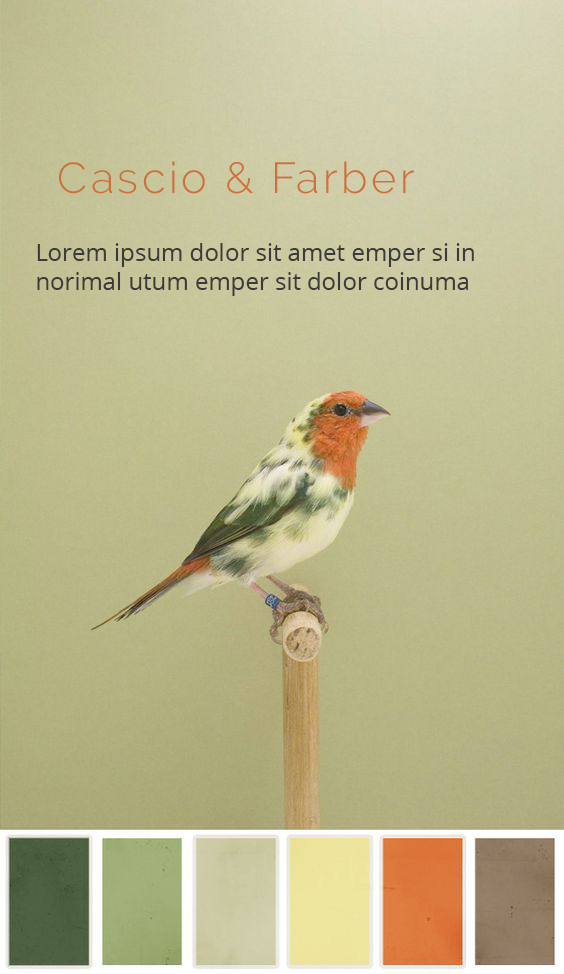
<style>
.page{position:relative;width:564px;height:974px}
.page>*{position:absolute;margin:0}
.t1{font:43.2px "Raleway-Light";letter-spacing:0.08em;color:#cf6f39}
.t2{font:24px "OpenSans-Regular";color:#3b3b3b}
</style>
<div class="page">
<p class="t1" style="left:59px;top:161px;width:355px;height:33px">Cascio &amp; Farber</p>
<p class="t2" style="left:37px;top:243px;width:437px;height:53px">Lorem ipsum dolor sit amet emper si in norimal utum emper sit dolor coinuma</p>
</div>
